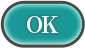
<style>
.page{position:relative;width:85px;height:48px;background:#1a9897}
.page>*{position:absolute;margin:0}
.t1{font:22px "RyuminPro-ExBold";letter-spacing:-0.08em;color:#fdfbf9}
</style>
<div class="page">
<p class="t1" style="left:27px;top:16px;width:32px;height:17px">OK</p>
</div>
